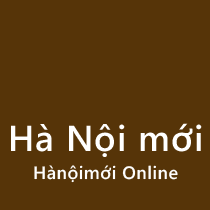
<style>
.page{position:relative;width:210px;height:210px;background:#563408}
.page>*{position:absolute;margin:0}
.t1{font:36px "SegoeWP-Semibold";letter-spacing:0.025em;color:#ffffff}
.t2{font:18px "SegoeWP-Semibold";letter-spacing:0.025em;color:#fefefe}
</style>
<div class="page">
<p class="t1" style="left:11px;top:123px;width:191px;height:34px">Hà Nội mới</p>
<p class="t2" style="left:34px;top:165px;width:144px;height:18px">Hànộimới Online</p>
</div>
